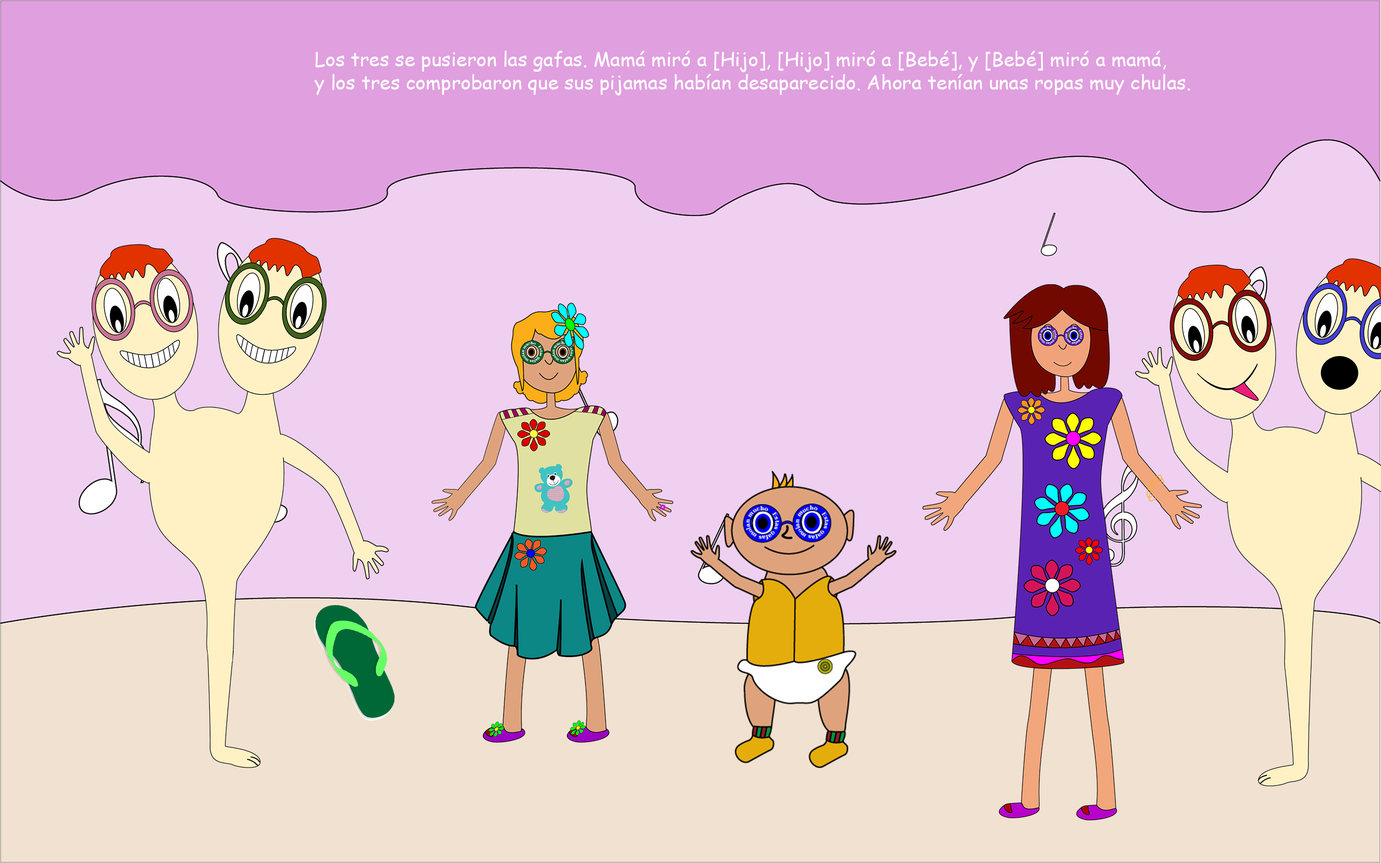
<style>
.page{position:relative;width:1381px;height:863px;background:#efd0f0}
.page>*{position:absolute;margin:0}
.t1{font:19.4px "ComicSansMS";color:#ffffff}
</style>
<div class="page">
<p class="t1" style="left:315px;top:51px;width:875px;height:45px">Los tres se pusieron las gafas. Mamá miró a [Hijo], [Hijo] miró a [Bebé], y [Bebé] miró a mamá, <br>y los tres comprobaron que sus pijamas habían desaparecido. Ahora tenían unas ropas muy chulas.</p>
</div>
